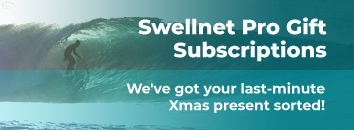
<style>
.page{position:relative;width:354px;height:130px}
.page>*{position:absolute;margin:0}
.t1{font:21px/23px "Montserrat-ExtraBold";color:#ffffff}
.t2{font:14px "Montserrat-Bold";color:#ffffff}
</style>
<div class="page">
<p class="t1" style="left:138px;top:17px;width:189px;height:45px;text-align:right">Swellnet Pro Gift Subscriptions</p>
<p class="t2" style="left:126px;top:82px;width:199px;height:31px;text-align:right">We've got your last-minute Xmas present sorted!</p>
</div>
